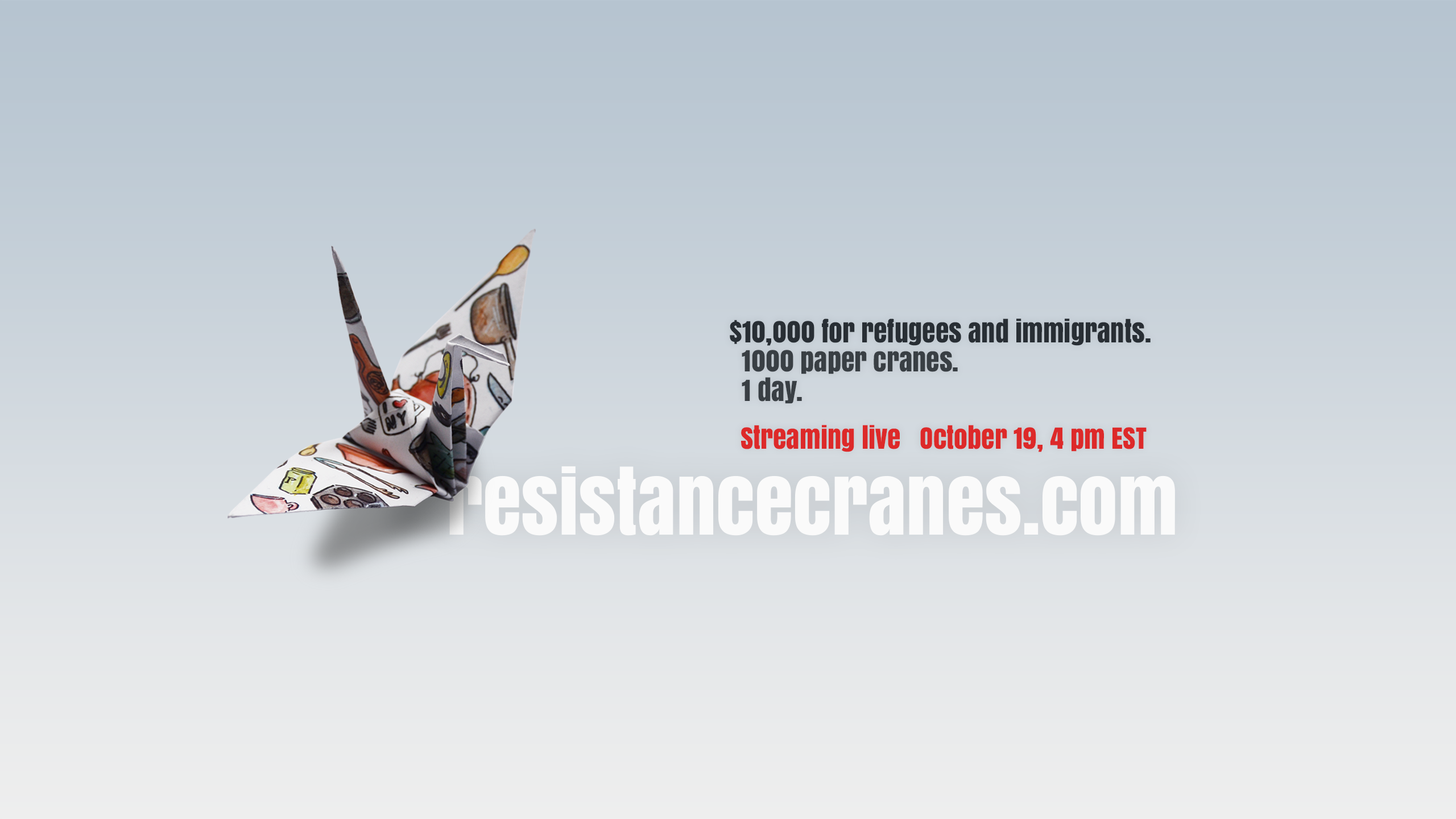
<style>
.page{position:relative;width:1456px;height:819px}
.page>*{position:absolute;margin:0}
.t1{font:27.3px/27.3px "Anton";color:#282e34}
.t2{font:27.3px/27.3px "Anton";color:#393f44}
.t3{font:27.3px "Anton";color:#dd2929}
.t4{font:78.9px "Anton";color:#fafafa}
</style>
<div class="page">
<p class="t1" style="left:730px;top:318px;width:421px;height:86px">$10,000 for refugees and immigrants.<br><span class="t2">  1000 paper cranes.<br>  1 day.</span></p>
<p class="t3" style="left:741px;top:425px;width:406px;height:27px">Streaming live   October 19, 4 pm EST</p>
<p class="t4" style="left:449px;top:466px;width:726px;height:70px">resistancecranes.com</p>
</div>
